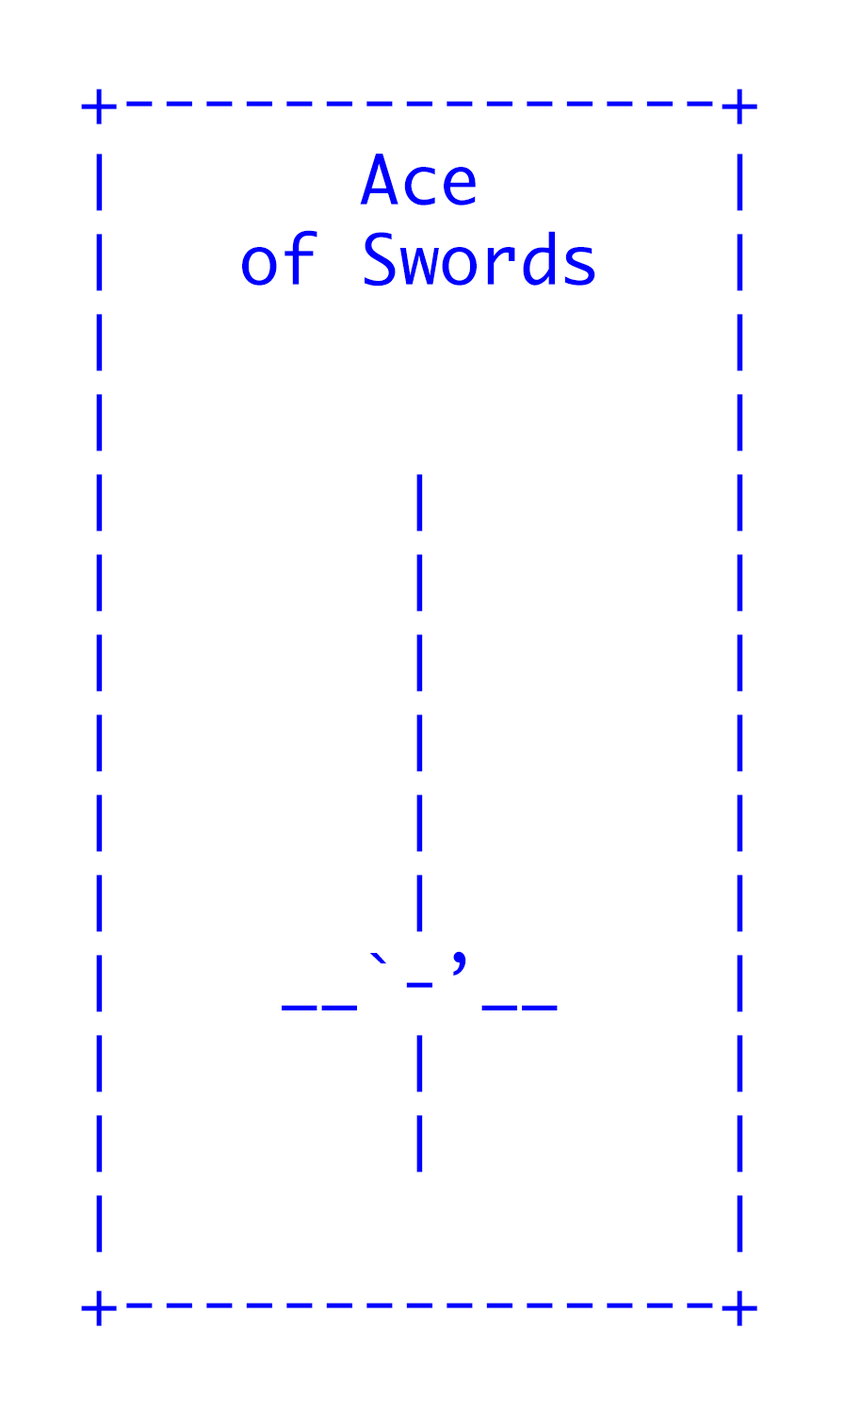
<style>
.page{position:relative;width:845px;height:1411px;background:#ffffff}
.page>*{position:absolute;margin:0}
.t1{font:66.7px "Monaco";color:#0000ff}
</style>
<div class="page">
<p class="t1" style="left:81px;top:89px;width:677px;height:1237px">+---------------+<br>│      Ace      │<br>│   of Swords   │<br>│               │<br>│               │<br>│       │       │ <br>│       │       │ <br>│       │       │<br>│       │       │ <br>│       │       │ <br>│       │       │ <br>│    __`-’__    │  <br>│       │       │<br>│       │       │<br>│               │<br>+---------------+</p>
</div>
